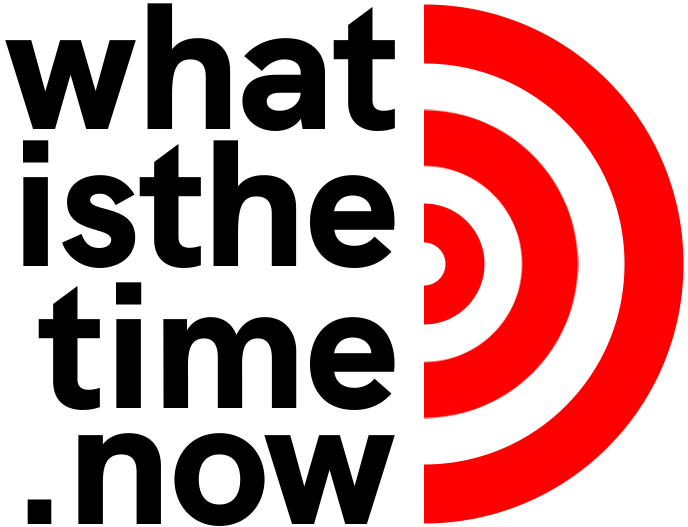
<style>
.page{position:relative;width:688px;height:527px;background:#ffffff}
.page>*{position:absolute;margin:0}
.t1{font:180.3px "HKGrotesk-ExtraBold";color:#000000}
</style>
<div class="page">
<p class="t1" style="left:5px;top:3px;width:390px;height:128px">what</p>
<p class="t1" style="left:22px;top:140px;width:373px;height:128px">isthe</p>
<p class="t1" style="left:38px;top:282px;width:357px;height:128px">time</p>
<p class="t1" style="left:27px;top:433px;width:368px;height:93px">.now</p>
</div>
